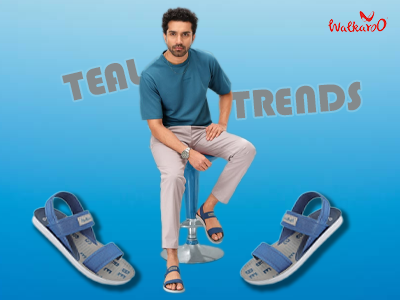
<style>
.page{position:relative;width:400px;height:300px}
.page>*{position:absolute;margin:0}
.t1{font:40px "Bauhaus93";color:#848a8c}
</style>
<div class="page">
<p class="t1" style="left:62px;top:58px;width:81px;height:43px;rotate:-13deg">TEAL</p>
<p class="t1" style="left:229px;top:81px;width:132px;height:38px;rotate:-5deg">TRENDS</p>
</div>
